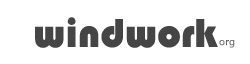
<style>
.page{position:relative;width:250px;height:64px;background:#ffffff}
.page>*{position:absolute;margin:0}
.t1{font:42px "Bauhaus93";color:#454545}
.t2{font:10px "LaoUI";color:#666666;font-weight:bold}
</style>
<div class="page">
<p class="t1" style="left:35px;top:17px;width:183px;height:31px">windwork</p>
<p class="t2" style="left:219px;top:40px;width:16px;height:8px">org</p>
</div>
